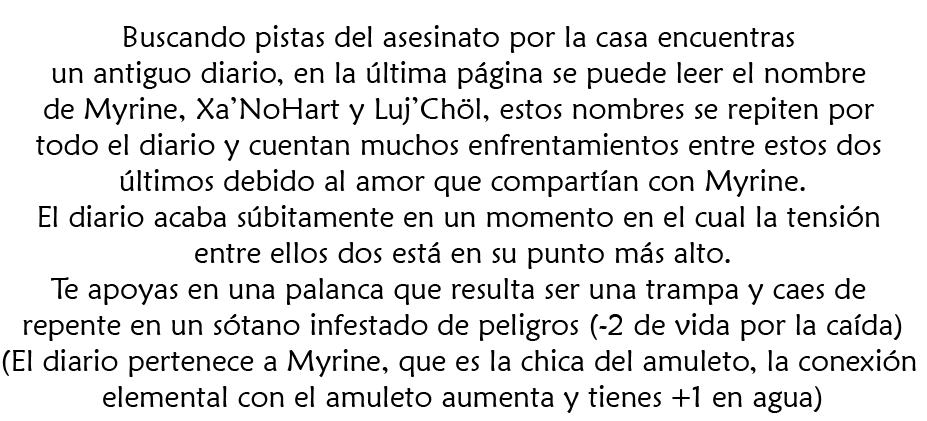
<style>
.page{position:relative;width:927px;height:421px;background:#ffffff}
.page>*{position:absolute;margin:0}
.t1{font:30px "MaiandraGD-Regular";color:#000000}
</style>
<div class="page">
<p class="t1" style="left:2px;top:25px;width:914px;height:388px;text-align:center">Buscando pistas del asesinato por la casa encuentras <br>un antiguo diario, en la última página se puede leer el nombre <br>de Myrine, Xa’NoHart y Luj’Chöl, estos nombres se repiten por <br>todo el diario y cuentan muchos enfrentamientos entre estos dos <br>últimos debido al amor que compartían con Myrine.<br>El diario acaba súbitamente en un momento en el cual la tensión <br>entre ellos dos está en su punto más alto.<br>Te apoyas en una palanca que resulta ser una trampa y caes de <br>repente en un sótano infestado de peligros (-2 de vida por la caída)<br>(El diario pertenece a Myrine, que es la chica del amuleto, la conexión <br>elemental con el amuleto aumenta y tienes +1 en agua)</p>
</div>
